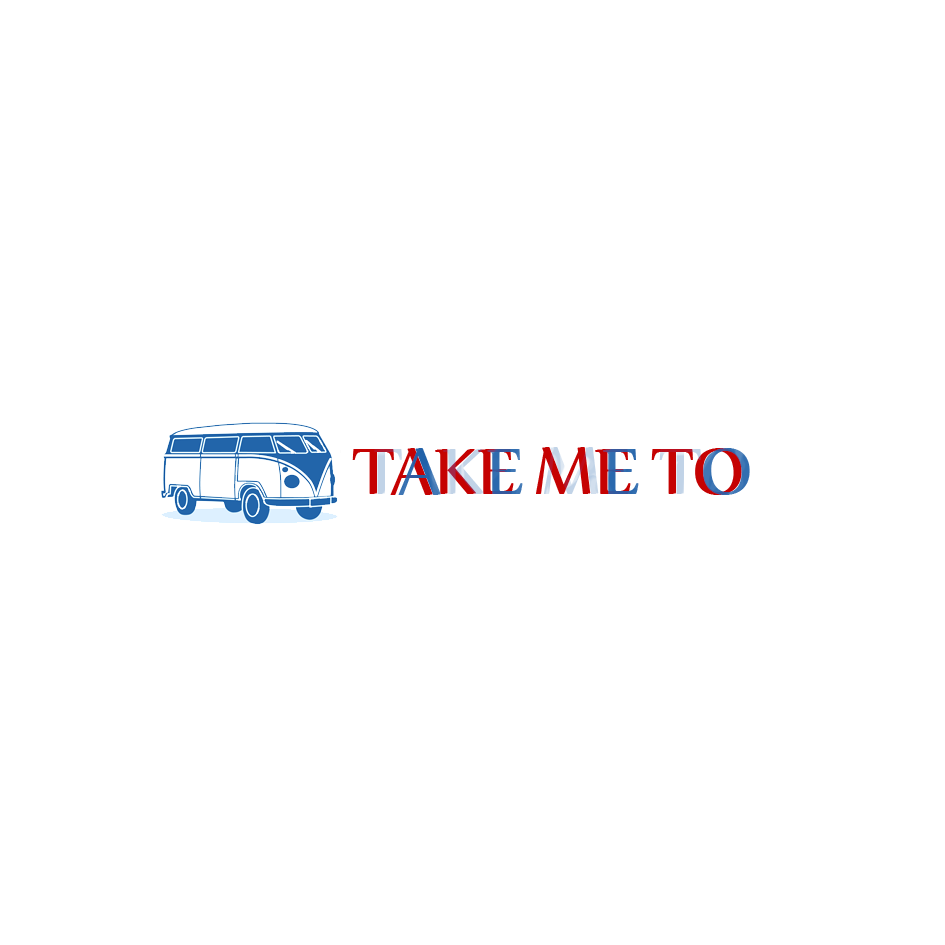
<style>
.page{position:relative;width:945px;height:945px;background:#ffffff}
.page>*{position:absolute;margin:0}
.t1{font:80px "Nyala-Regular";color:#c50202}
.t2{font:80px "Nyala-Regular"}
</style>
<div class="page">
<p class="t1" style="left:352px;top:447px;width:390px;height:48px">TAKE ME TO</p>
<p class="t2" style="left:360px;top:447px;width:390px;height:48px">TAKE ME TO</p>
</div>
